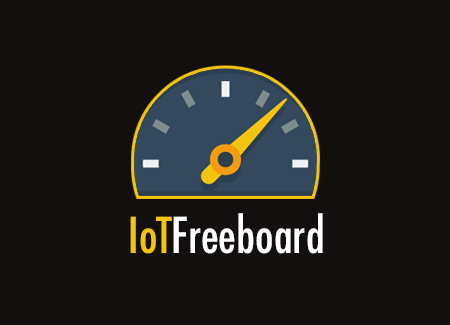
<style>
.page{position:relative;width:450px;height:325px;background:#130f0f}
.page>*{position:absolute;margin:0}
.t1{font:48px "Futura-CondensedMedium";color:#ffffff}
.t2{font:48px "Futura-CondensedMedium";color:#f1c40f}
</style>
<div class="page">
<p class="t1" style="left:130px;top:213px;width:193px;height:41px"><span class="t2">IoT</span>Freeboard</p>
</div>
